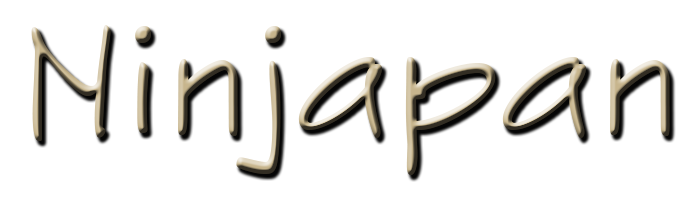
<style>
.page{position:relative;width:700px;height:200px;background:#ffffff}
.page>*{position:absolute;margin:0}
.t1{font:150px "SketchFlowPrint"}
</style>
<div class="page">
<p class="t1" style="left:31px;top:25px;width:639px;height:150px">Ninjapan</p>
</div>
